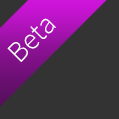
<style>
.page{position:relative;width:119px;height:119px;background:#333333}
.page>*{position:absolute;margin:0}
.t1{font:29.5px "SourceSansPro-Light";color:#ffffff}
</style>
<div class="page">
<p class="t1" style="left:7px;top:18px;width:49px;height:44px;rotate:-45deg">Beta</p>
</div>
